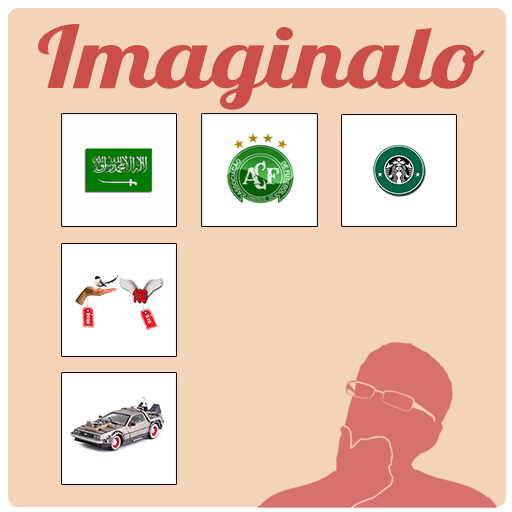
<style>
.page{position:relative;width:512px;height:512px;background:#f3d4b8}
.page>*{position:absolute;margin:0}
.t1{font:85.3px "Lobster1.4";color:#cb4e48;scale:1.25 1}
</style>
<div class="page">
<p class="t1" style="left:38px;top:24px;width:447px;height:86px">Imaginalo</p>
</div>
